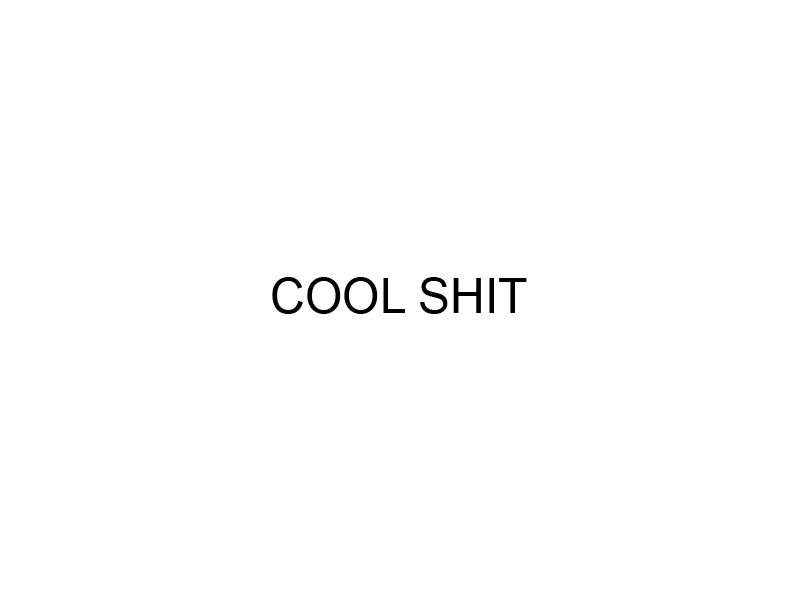
<style>
.page{position:relative;width:800px;height:600px;background:#ffffff}
.page>*{position:absolute;margin:0}
.t1{font:48px "ArialMT";color:#000000}
</style>
<div class="page">
<p class="t1" style="left:272px;top:277px;width:255px;height:37px">COOL SHIT</p>
</div>
